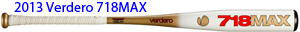
<style>
.page{position:relative;width:300px;height:32px;background:#ffffff}
.page>*{position:absolute;margin:0}
.t1{font:14px "MyriadPro-Regular";color:#0000ff}
</style>
<div class="page">
<p class="t1" style="left:14px;top:2px;width:133px;height:10px">2013 Verdero 718MAX</p>
</div>
